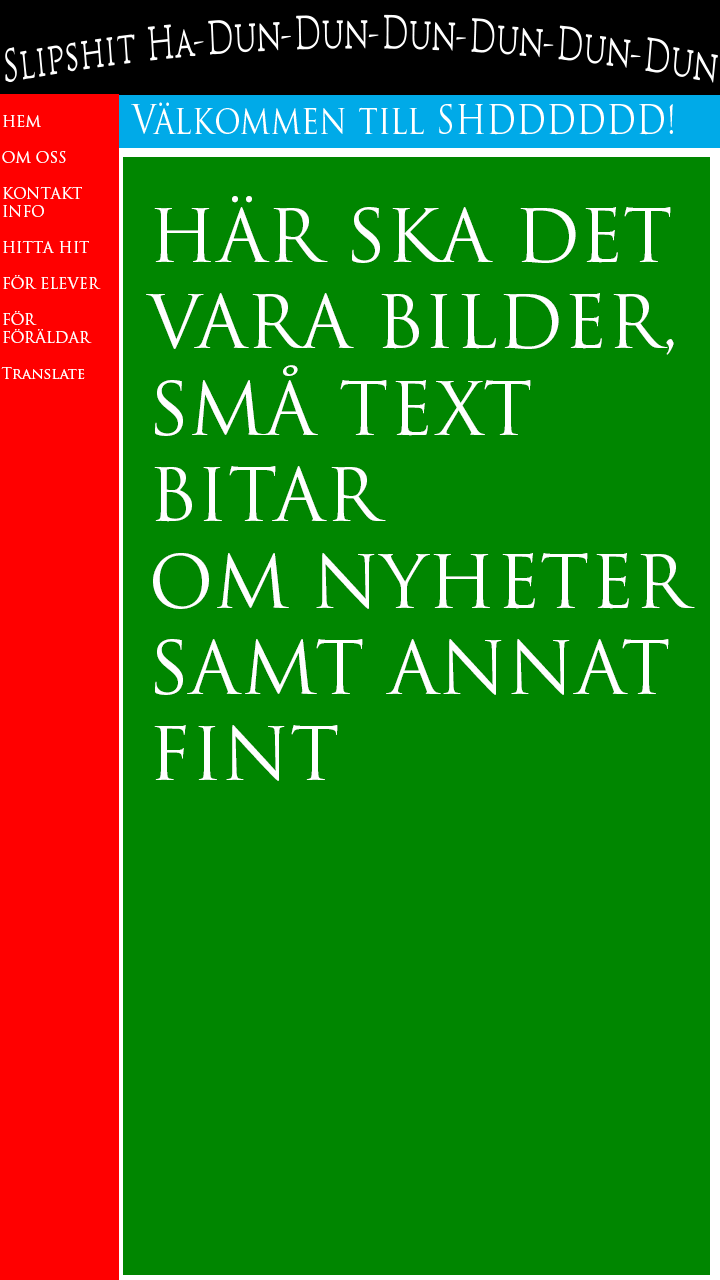
<style>
.page{position:relative;width:720px;height:1280px;background:#008600}
.page>*{position:absolute;margin:0}
.t1{font:15px "TrajanPro-Regular";color:#ffffff}
.t2{font:72px "TrajanPro-Regular";color:#ffffff}
</style>
<div class="page">
<p class="t1" style="left:1px;top:115px;width:100px;height:264px">HEM<br><br>OM OSS<br><br>KONTAKT<br>INFO<br><br>HITTA HIT<br><br>FÖR ELEVER<br><br>FÖR <br>FÖRÄLDAR<br><br>Translate</p>
<p class="t2" style="left:146px;top:196px;width:549px;height:585px">HÄR SKA DET <br>VARA BILDER,<br>SMÅ TEXT <br>BITAR <br>OM NYHETER<br>SAMT ANNAT<br>FINT</p>
</div>
